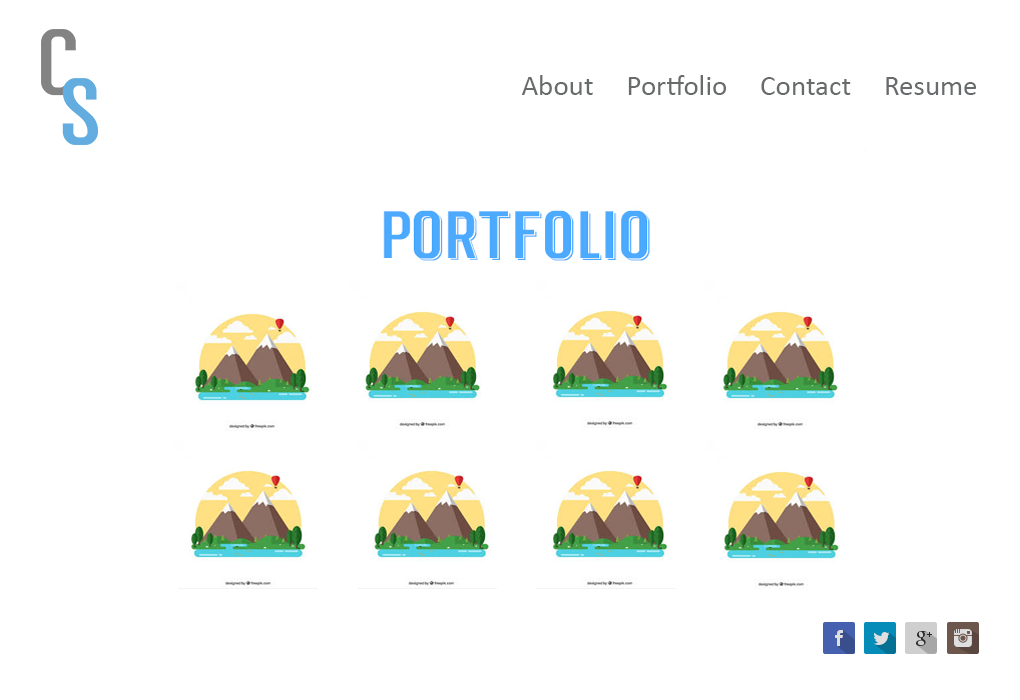
<style>
.page{position:relative;width:1020px;height:700px;background:#ffffff}
.page>*{position:absolute;margin:0}
.t1{font:29px "Calibri";color:#686b6c}
</style>
<div class="page">
<p class="t1" style="left:522px;top:75px;width:454px;height:20px">About     Portfolio     Contact     Resume</p>
</div>
